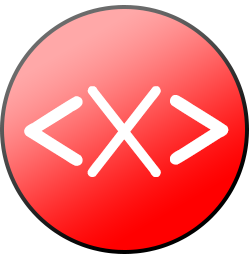
<style>
.page{position:relative;width:250px;height:259px;background:#ffffff}
.page>*{position:absolute;margin:0}
.t1{font:150px "Comfortaa";color:#ffffff}
.t2{font:129.2px "Comfortaa";color:#ffffff}
</style>
<div class="page">
<p class="t1" style="left:24px;top:86px;width:205px;height:91px">&lt;<span class="t2">X</span>&gt;</p>
</div>
